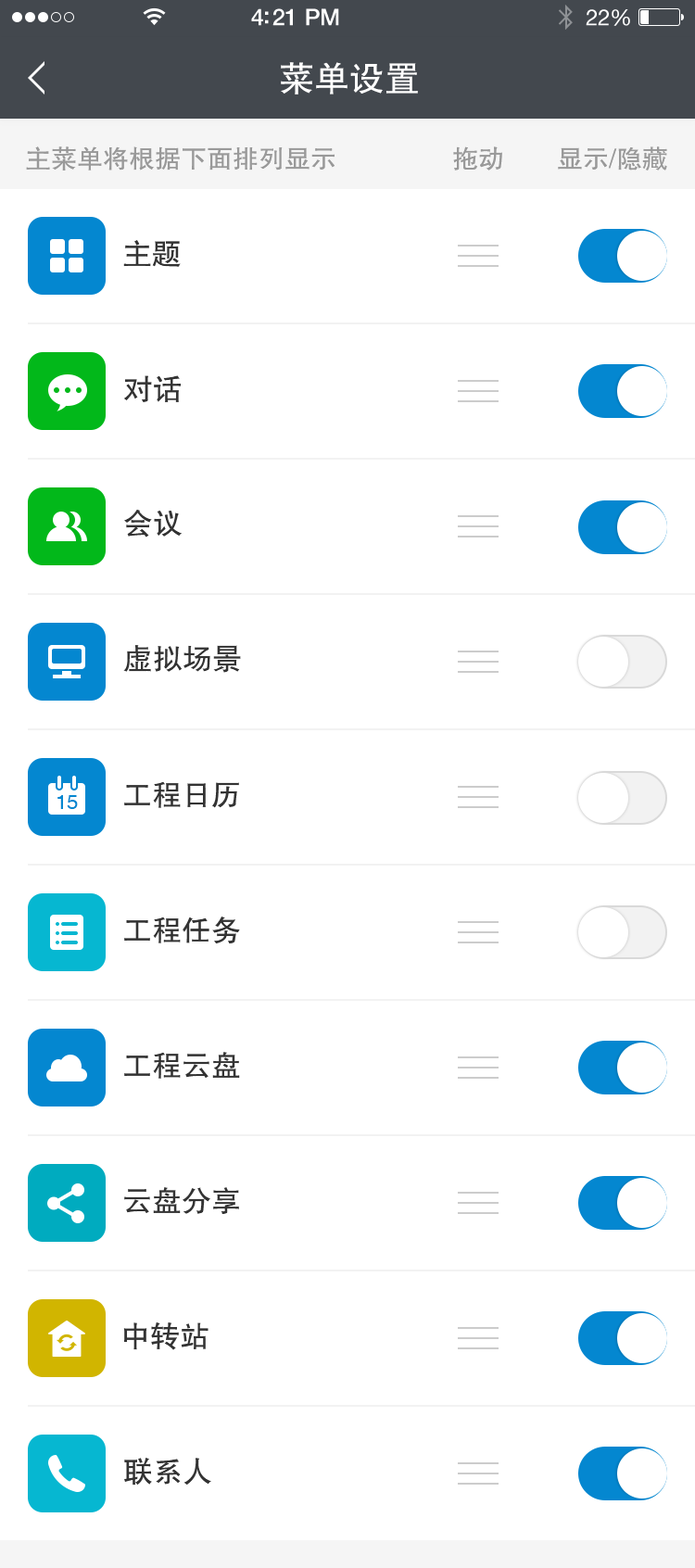
<style>
.page{position:relative;width:695px;height:1568px;background:#ffffff}
.page>*{position:absolute;margin:0}
.t1{font:35.2px "FZHTJW--GB1-0";color:#ffffff}
.t2{font:25.9px "FZHTJW--GB1-0";color:#999999}
.t3{font:29.7px "FZHTJW--GB1-0";color:#333333}
.t4{font:20.4px "Helvetica";color:#0487d0}
</style>
<div class="page">
<p class="t1" style="left:281px;top:62px;width:137px;height:33px">菜单设置</p>
<p class="t2" style="left:26px;top:146px;width:309px;height:25px">主菜单将根据下面排列显示</p>
<p class="t2" style="left:453px;top:146px;width:49px;height:25px">拖动</p>
<p class="t2" style="left:558px;top:146px;width:109px;height:25px">显示/隐藏</p>
<p class="t3" style="left:123px;top:240px;width:58px;height:27px">主题</p>
<p class="t3" style="left:124px;top:375px;width:57px;height:27px">对话</p>
<p class="t3" style="left:124px;top:510px;width:58px;height:27px">会议</p>
<p class="t3" style="left:123px;top:645px;width:118px;height:28px">虚拟场景</p>
<p class="t3" style="left:124px;top:781px;width:115px;height:27px">工程日历</p>
<p class="t4" style="left:57px;top:795px;width:21px;height:14px">15</p>
<p class="t3" style="left:124px;top:917px;width:116px;height:26px">工程任务</p>
<p class="t3" style="left:124px;top:1052px;width:116px;height:27px">工程云盘</p>
<p class="t3" style="left:124px;top:1187px;width:115px;height:27px">云盘分享</p>
<p class="t3" style="left:123px;top:1322px;width:86px;height:28px">中转站</p>
<p class="t3" style="left:124px;top:1458px;width:87px;height:28px">联系人</p>
</div>
